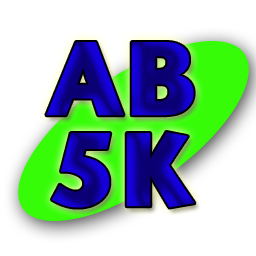
<style>
.page{position:relative;width:256px;height:256px;background:#ffffff}
.page>*{position:absolute;margin:0}
.t1{font:101px/91px "StoneSansITCTTBold";font-weight:bold}
</style>
<div class="page">
<p class="t1" style="left:46px;top:42px;width:149px;height:166px;text-align:center">AB<br>5K</p>
</div>
